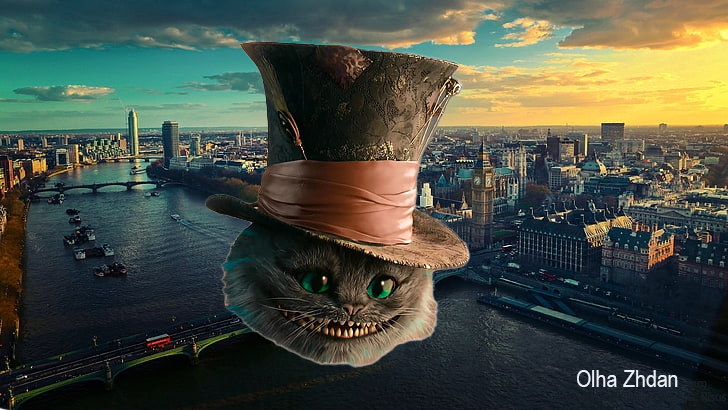
<style>
.page{position:relative;width:728px;height:410px}
.page>*{position:absolute;margin:0}
.t1{font:12px "MyriadPro-Regular";color:#191e25}
.t2{font:24px "ArialNarrow";color:#ebf0f6}
</style>
<div class="page">
<p class="t1" style="left:556px;top:370px;width:170px;height:33px"><span class="t2">Olha Zhdan</span>psum suspendisse ultrices gravida. Risus commodo viverra maecenas accumsan lacus vel facilisis.</p>
</div>
